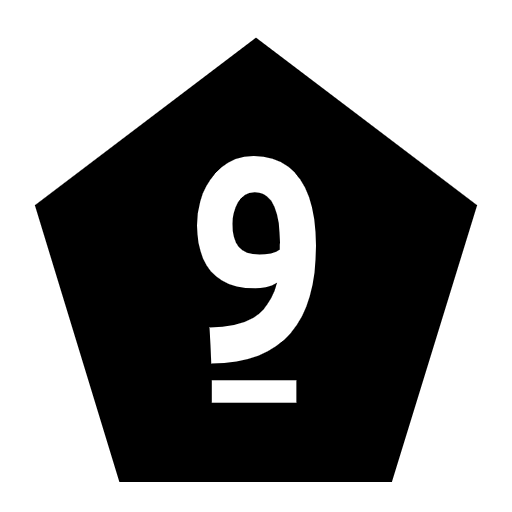
<style>
.page{position:relative;width:512px;height:512px;background:#ffffff}
.page>*{position:absolute;margin:0}
.t1{font:291.4px "Ubuntu-Bold";color:#ffffff;scale:0.82 1}
.t2{font:181.1px "Ubuntu-Bold";color:#ffffff;scale:0.93 1}
</style>
<div class="page">
<p class="t1" style="left:197px;top:156px;width:119px;height:208px">9</p>
<p class="t2" style="left:211px;top:380px;width:86px;height:23px">_</p>
</div>
